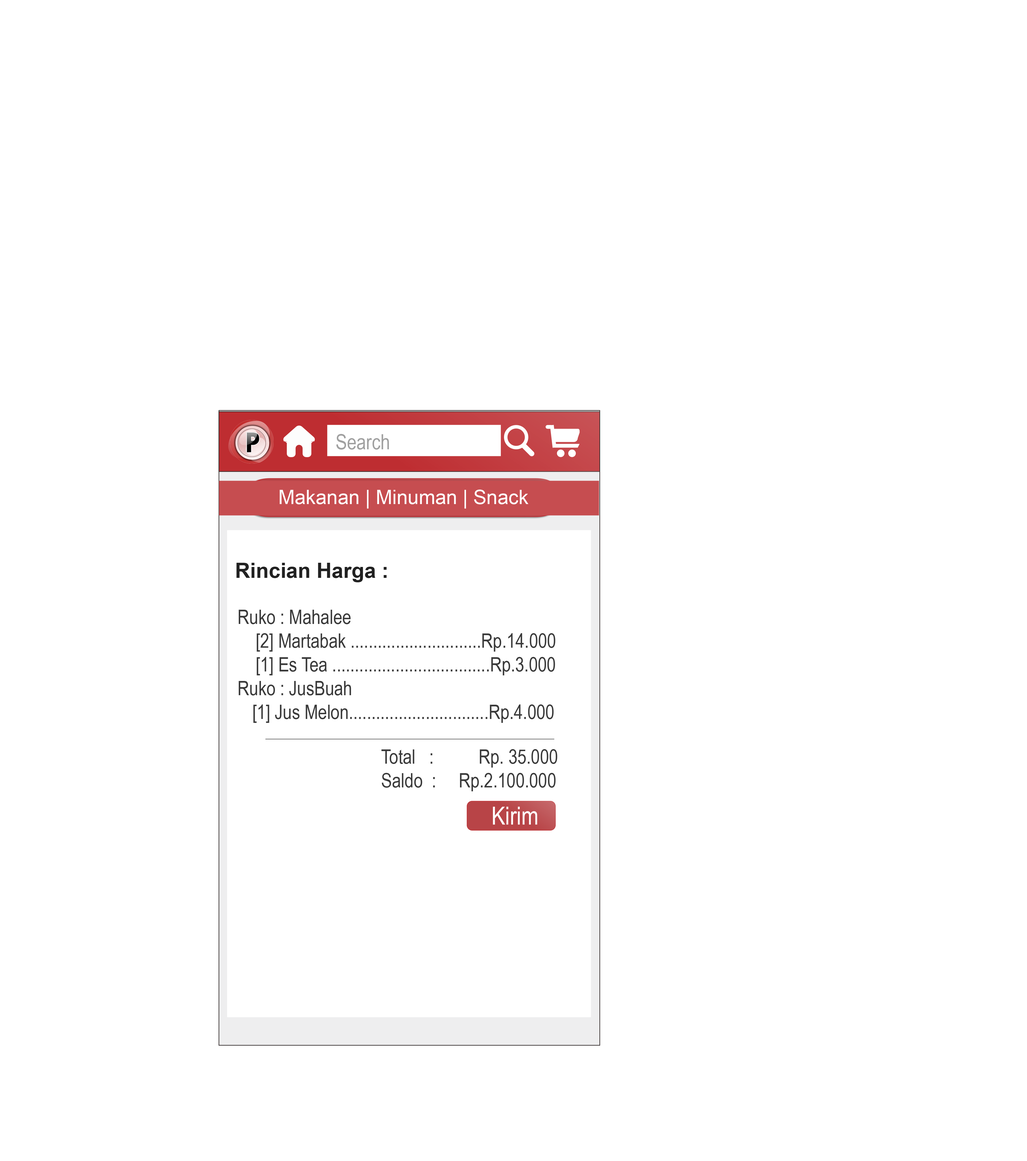
<style>
.page{position:relative;width:1027px;height:1161px;background:#ffffff}
.page>*{position:absolute;margin:0}
.t1{font:21px "ArialNarrow";color:#a0a0a0}
.t2{font:19.8px "ArialMT";color:#fffefe}
.t3{font:21px "Arial-BoldMT";color:#212121}
.t4{font:19.8px "ArialNarrow";color:#3a3a3a}
.t5{font:25.1px "ArialNarrow";color:#ffffff}
</style>
<div class="page">
<p class="t1" style="left:336px;top:434px;width:53px;height:16px">Search</p>
<p class="t2" style="left:280px;top:490px;width:249px;height:19px">Makanan | Minuman | Snack</p>
<p class="t3" style="left:236px;top:563px;width:151px;height:19px">Rincian Harga :</p>
<p class="t4" style="left:239px;top:610px;width:316px;height:113px">Ruko : Mahalee<br>    [2] Martabak .............................Rp.14.000<br>    [1] Es Tea ...................................Rp.3.000<br>Ruko : JusBuah<br>  [1] Jus Melon...............................Rp.4.000</p>
<p class="t4" style="left:381px;top:749px;width:176px;height:42px">Total   :          Rp. 35.000<br>Saldo  :     Rp.2.100.000</p>
<p class="t5" style="left:493px;top:807px;width:44px;height:18px">Kirim</p>
</div>
